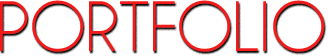
<style>
.page{position:relative;width:328px;height:56px;background:#ffffff}
.page>*{position:absolute;margin:0}
.t1{font:72px "Champagne&Limousines";color:#f21b1b}
</style>
<div class="page">
<p class="t1" style="left:0px;top:0px;width:325px;height:52px">PORTFOLIO</p>
</div>
